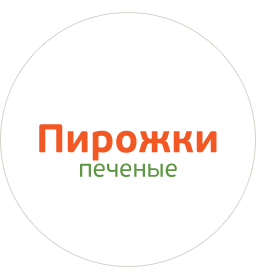
<style>
.page{position:relative;width:278px;height:279px;background:#ffffff}
.page>*{position:absolute;margin:0}
.t1{font:40px "PFBeauSansPro-Bold";color:#f25824}
.t2{font:25px "PFBeauSansPro-Regular";color:#5d9743}
</style>
<div class="page">
<p class="t1" style="left:39px;top:124px;width:178px;height:37px">Пирожки</p>
<p class="t2" style="left:80px;top:163px;width:97px;height:14px">печеные</p>
</div>
